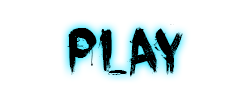
<style>
.page{position:relative;width:250px;height:100px;background:#ffffff}
.page>*{position:absolute;margin:0}
.t1{font:60px "FaceYourFears";color:#0e0e0e}
</style>
<div class="page">
<p class="t1" style="left:67px;top:24px;width:116px;height:53px">Play</p>
</div>
